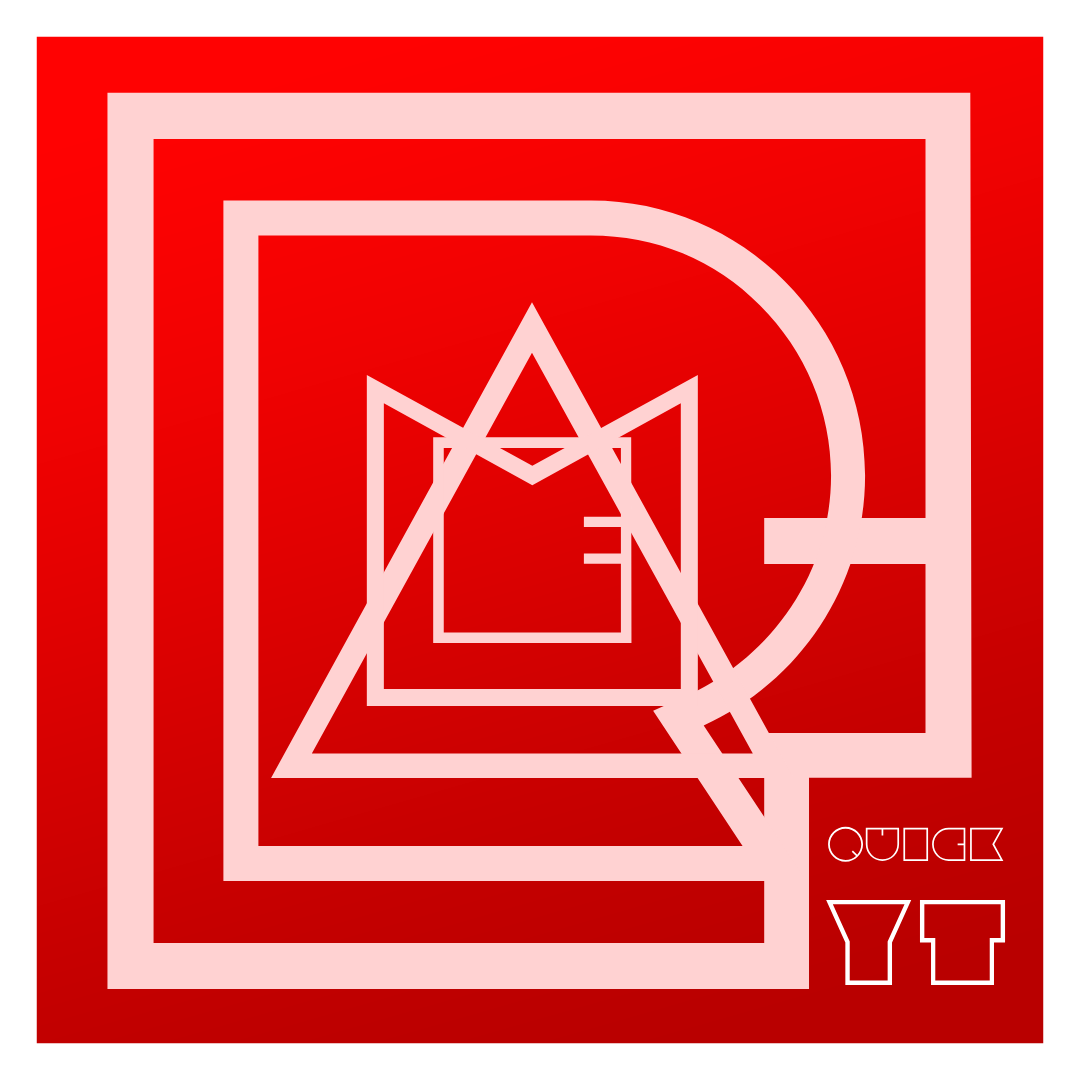
<style>
.page{position:relative;width:1080px;height:1080px;background:#ffd2d2}
.page>*{position:absolute;margin:0}
.t1{font:1280.2px "DubtronicInline";color:#ffd2d2}
.t2{font:972.3px "DubtronicInline";color:#ffd2d2}
.t3{font:679.5px "DubtronicInline";color:#ffd2d2}
.t4{font:472.9px "DubtronicInline";color:#ffd2d2}
.t5{font:293.8px "DubtronicInline";color:#ffd2d2}
.t6{font:47.5px "DubtronicInline";color:#ffffff}
.t7{font:121.5px "DubtronicInline";color:#ffffff}
</style>
<div class="page">
<p class="t1" style="left:107px;top:92px;width:865px;height:897px">F</p>
<p class="t2" style="left:223px;top:200px;width:643px;height:681px">R</p>
<p class="t3" style="left:271px;top:302px;width:523px;height:476px">A</p>
<p class="t4" style="left:366px;top:375px;width:332px;height:331px">M</p>
<p class="t5" style="left:433px;top:437px;width:199px;height:206px">E</p>
<p class="t6" style="left:828px;top:826px;width:176px;height:36px">Quick</p>
<p class="t7" style="left:826px;top:899px;width:180px;height:86px">YT</p>
</div>
